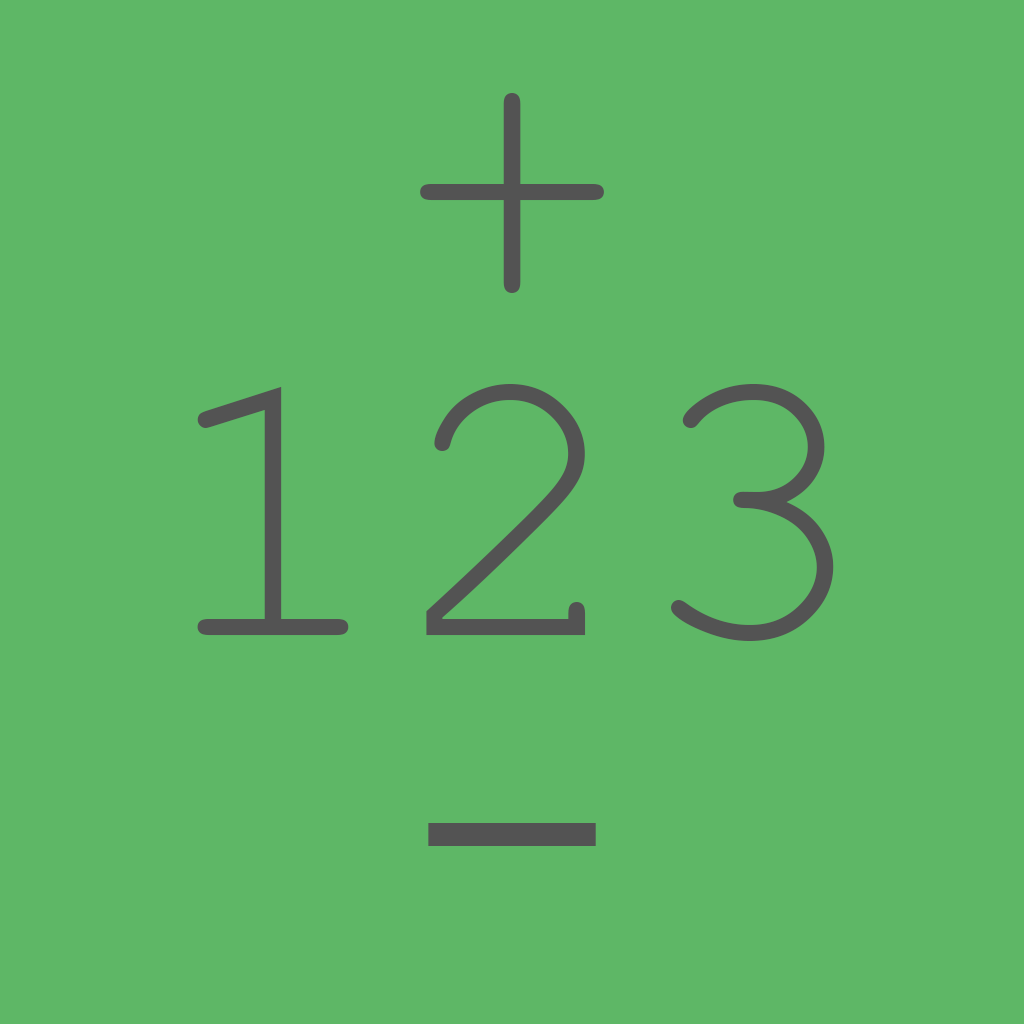
<style>
.page{position:relative;width:1024px;height:1024px;background:#5eb766}
.page>*{position:absolute;margin:0}
.t1{font:400px "CourierNewPSMT";color:#535353}
</style>
<div class="page">
<p class="t1" style="left:420px;top:93px;width:184px;height:200px">+</p>
<p class="t1" style="left:197px;top:384px;width:637px;height:257px">123</p>
<p class="t1" style="left:428px;top:823px;width:168px;height:23px">-</p>
</div>
